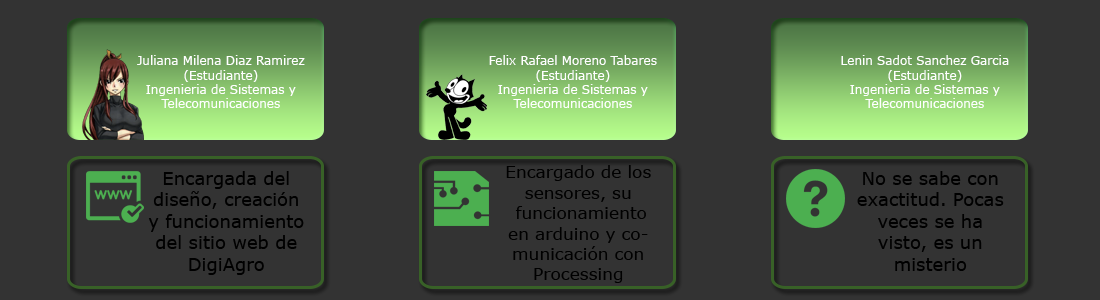
<style>
.page{position:relative;width:1100px;height:300px;background:#333333}
.page>*{position:absolute;margin:0}
.t1{font:12px "Verdana";color:#ffffff}
.t2{font:18px "Verdana";color:#000000}
.t3{font:17px "Verdana";color:#000000}
</style>
<div class="page">
<p class="t1" style="left:137px;top:55px;width:168px;height:53px;text-align:center">Juliana Milena Diaz Ramirez<br>(Estudiante)<br>Ingenieria de Sistemas y Telecomunicaciones</p>
<p class="t1" style="left:489px;top:55px;width:168px;height:53px;text-align:center">Felix Rafael Moreno Tabares<br>(Estudiante)<br>Ingenieria de Sistemas y Telecomunicaciones</p>
<p class="t1" style="left:841px;top:55px;width:168px;height:53px;text-align:center">Lenin Sadot Sanchez Garcia<br>(Estudiante)<br>Ingenieria de Sistemas y Telecomunicaciones</p>
<p class="t2" style="left:148px;top:171px;width:156px;height:104px;text-align:center">Encargada del diseño, creación y funcionamiento del sitio web de DigiAgro</p>
<p class="t3" style="left:506px;top:165px;width:145px;height:118px;text-align:center">Encargado de los sensores, su<br> funcionamiento en arduino y comunicación con <br>Processing</p>
<p class="t2" style="left:857px;top:171px;width:147px;height:100px;text-align:center">No se sabe con exactitud. Pocas veces se ha visto, es un <br>misterio</p>
</div>
